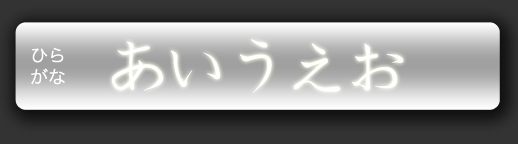
<style>
.page{position:relative;width:518px;height:144px}
.page>*{position:absolute;margin:0}
.t1{font:60px "Bukvica";color:#ffffff}
.t2{font:18px "HiraKakuProN-W3";color:#ffffff}
</style>
<div class="page">
<p class="t1" style="left:112px;top:39px;width:292px;height:54px">あいうえお</p>
<p class="t2" style="left:31px;top:47px;width:34px;height:38px;text-align:center">ひら<br>がな</p>
</div>
